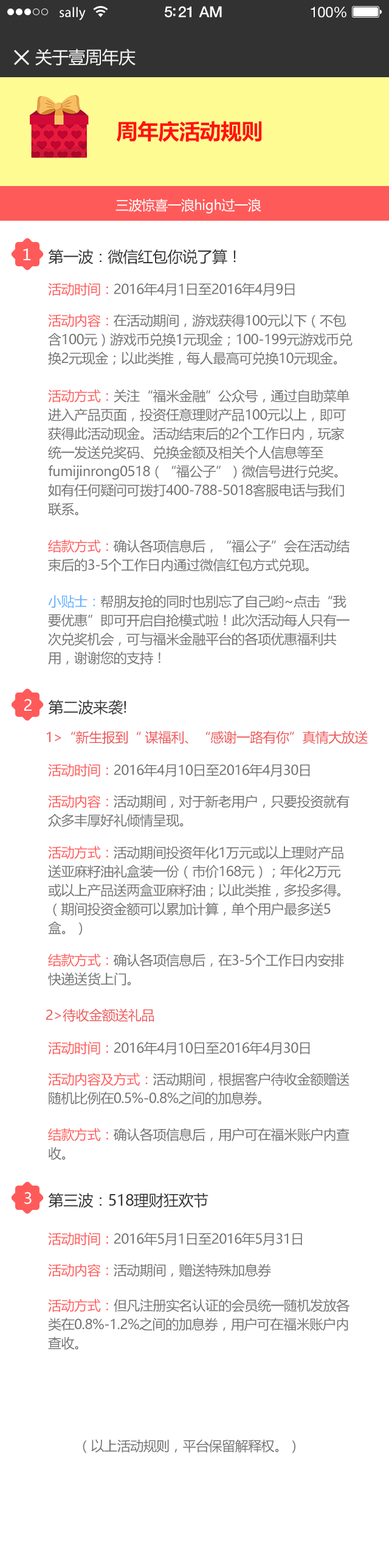
<style>
.page{position:relative;width:389px;height:1568px;background:#ffffff}
.page>*{position:absolute;margin:0}
.t1{font:14px "MyriadPro-Regular";letter-spacing:0.02em;color:#ffffff}
.t2{font:15.2px "HelveticaNeue-Medium";letter-spacing:-0.02em;color:#ffffff}
.t3{font:14.6px "HelveticaNeue";letter-spacing:-0.02em;color:#ffffff}
.t4{font:17px "MicrosoftYaHei";letter-spacing:-0.02em;color:#f3f3f3}
.t5{font:21.3px "MicrosoftYaHei-Bold";letter-spacing:-0.02em;color:#ff1313}
.t6{font:13.4px "MicrosoftYaHei";letter-spacing:-0.02em;color:#ffffff}
.t7{font:15.2px "MicrosoftYaHei";letter-spacing:-0.02em;color:#ffffff}
.t8{font:15.2px "MicrosoftYaHei";letter-spacing:-0.02em;color:#333333}
.t9{font:13.4px "MicrosoftYaHei";letter-spacing:-0.02em;color:#727272}
.t10{font:13.4px "MicrosoftYaHei";letter-spacing:-0.02em;color:#ff5a5a}
.t11{font:13.4px/18.8px "MicrosoftYaHei";letter-spacing:-0.02em;color:#727272}
.t12{font:13.4px/18.8px "MicrosoftYaHei";letter-spacing:-0.02em;color:#ff5a5a}
.t13{font:13.4px/18.8px "MicrosoftYaHei";letter-spacing:-0.02em;color:#65b1ff}
.t14{font:13.4px "MicrosoftYaHei";letter-spacing:-0.02em;color:#ed5757}
</style>
<div class="page">
<p class="t1" style="left:60px;top:7px;width:26px;height:14px">sally</p>
<p class="t2" style="left:165px;top:6px;width:57px;height:12px">5:21 AM</p>
<p class="t3" style="left:311px;top:7px;width:36px;height:11px">100%</p>
<p class="t4" style="left:35px;top:49px;width:101px;height:17px">关于壹周年庆</p>
<p class="t5" style="left:116px;top:121px;width:146px;height:21px">周年庆活动规则</p>
<p class="t6" style="left:116px;top:198px;width:145px;height:15px">三波惊喜一浪high过一浪</p>
<p class="t7" style="left:23px;top:248px;width:8px;height:12px">１</p>
<p class="t8" style="left:48px;top:249px;width:188px;height:15px">第一波：微信红包你说了算！</p>
<p class="t9" style="left:48px;top:283px;width:247px;height:13px"><span class="t10">活动时间：</span>2016年4月1日至2016年4月9日</p>
<p class="t11" style="left:48px;top:314px;width:305px;height:51px"><span class="t12">活动内容：</span>在活动期间，游戏获得100元以下（不包含100元）游戏币兑换1元现金；100-199元游戏币兑换2元现金；以此类推，每人最高可兑换10元现金。参加游戏者可通过邀请好友或分享朋友圈来累计游戏币。</p>
<p class="t11" style="left:48px;top:389px;width:302px;height:127px"><span class="t12">活动方式：</span>关注“福米金融”公众号，通过自助菜单进入产品页面，投资任意理财产品100元以上，即可获得此活动现金。活动结束后的2个工作日内，玩家统一发送兑奖码、兑换金额及相关个人信息等至fumijinrong0518（“福公子”）微信号进行兑奖。如有任何疑问可拨打400-788-5018客服电话与我们联系。</p>
<p class="t11" style="left:48px;top:539px;width:302px;height:33px"><span class="t12">结款方式：</span>确认各项信息后，“福公子”会在活动结束后的3-5个工作日内通过微信红包方式兑现。</p>
<p class="t11" style="left:48px;top:595px;width:302px;height:70px"><span class="t13">小贴士：</span>帮朋友抢的同时也别忘了自己哟~点击“我要优惠”即可开启自抢模式啦！此次活动每人只有一次兑奖机会，可与福米金融平台的各项优惠福利共用，谢谢您的支持！</p>
<p class="t7" style="left:24px;top:699px;width:8px;height:12px">2</p>
<p class="t8" style="left:48px;top:700px;width:78px;height:15px">第二波来袭!</p>
<p class="t14" style="left:47px;top:731px;width:321px;height:13px">1&gt;“新生报到“ 谋福利、“感谢一路有你”真情大放送</p>
<p class="t9" style="left:48px;top:764px;width:262px;height:13px"><span class="t10">活动时间：</span>2016年4月10日至2016年4月30日</p>
<p class="t11" style="left:48px;top:795px;width:302px;height:32px"><span class="t12">活动内容：</span>活动期间，对于新老用户，只要投资就有众多丰厚好礼倾情呈现。</p>
<p class="t11" style="left:48px;top:846px;width:296px;height:89px"><span class="t12">活动方式：</span>活动期间投资年化1万元或以上理财产品送亚麻籽油礼盒装一份（市价168元）；年化2万元或以上产品送两盒亚麻籽油；以此类推，多投多得。（期间投资金额可以累加计算，单个用户最多送5盒。）</p>
<p class="t11" style="left:48px;top:953px;width:296px;height:33px"><span class="t12">结款方式：</span>确认各项信息后，在3-5个工作日内安排快递送货上门。</p>
<p class="t14" style="left:46px;top:1009px;width:108px;height:13px">2&gt;待收金额送礼品</p>
<p class="t9" style="left:48px;top:1041px;width:262px;height:14px"><span class="t10">活动时间：</span>2016年4月10日至2016年4月30日</p>
<p class="t11" style="left:48px;top:1072px;width:302px;height:33px"><span class="t12">活动内容及方式：</span>活动期间，根据客户待收金额赠送随机比例在0.5%-0.8%之间的加息券。</p>
<p class="t11" style="left:48px;top:1128px;width:302px;height:32px"><span class="t12">结款方式：</span>确认各项信息后，用户可在福米账户内查收。</p>
<p class="t7" style="left:24px;top:1192px;width:8px;height:12px">3</p>
<p class="t8" style="left:48px;top:1193px;width:161px;height:15px">第三波：518理财狂欢节</p>
<p class="t9" style="left:48px;top:1232px;width:254px;height:14px"><span class="t10">活动时间：</span>2016年5月1日至2016年5月31日</p>
<p class="t9" style="left:48px;top:1263px;width:223px;height:14px"><span class="t10">活动内容：</span>活动期间，赠送特殊加息券</p>
<p class="t11" style="left:48px;top:1299px;width:302px;height:51px"><span class="t12">活动方式：</span>但凡注册实名认证的会员统一随机发放各类在0.8%-1.2%之间的加息券，用户可在福米账户内查收。</p>
<p class="t9" style="left:83px;top:1439px;width:212px;height:14px">（以上活动规则，平台保留解释权。）</p>
</div>
